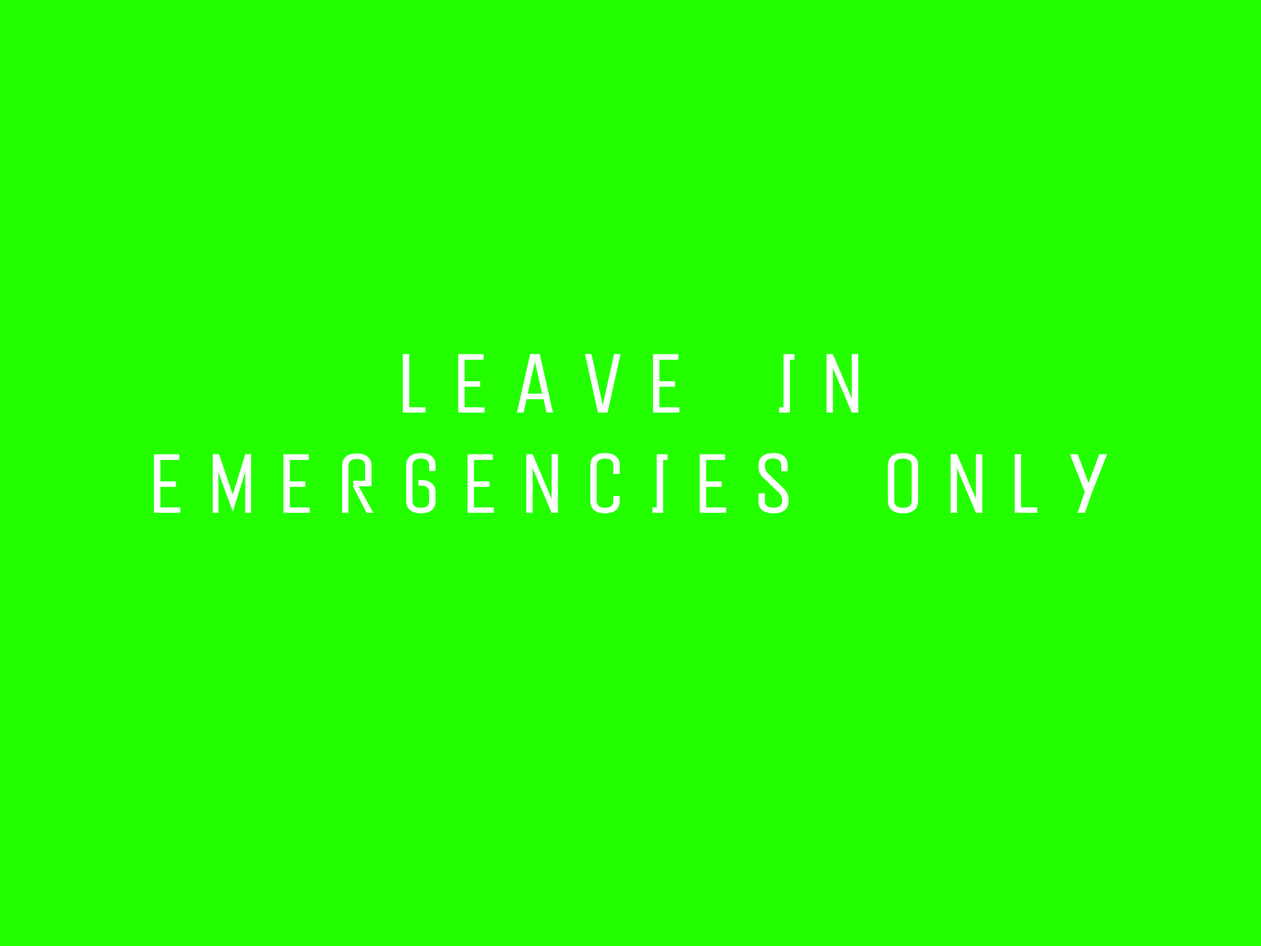
<style>
.page{position:relative;width:1261px;height:946px;background:#24ff00}
.page>*{position:absolute;margin:0}
.t1{font:83.4px "PeytonDisplay-ExtraLight";letter-spacing:0.28em;color:#ffffff}
</style>
<div class="page">
<p class="t1" style="left:153px;top:354px;width:955px;height:159px;text-align:center">LEAVE IN EMERGENCIES ONLY</p>
</div>
